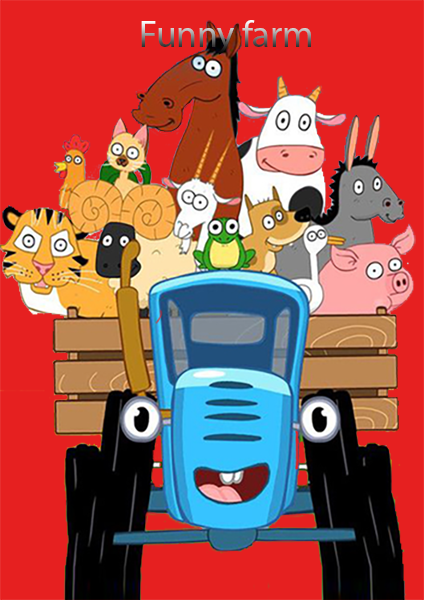
<style>
.page{position:relative;width:424px;height:600px;background:#e62020}
.page>*{position:absolute;margin:0}
.t1{font:37.5px "MyriadPro-Regular";letter-spacing:-0.01em}
</style>
<div class="page">
<p class="t1" style="left:141px;top:20px;width:170px;height:35px">Funny farm</p>
</div>
